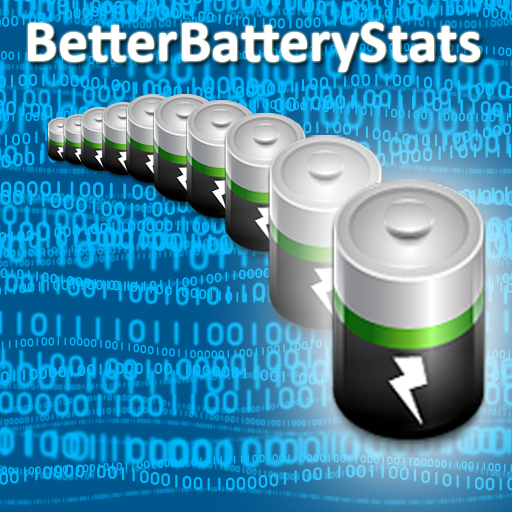
<style>
.page{position:relative;width:512px;height:512px}
.page>*{position:absolute;margin:0}
.t1{font:60px "Calibri-Bold";color:#ffffff}
</style>
<div class="page">
<p class="t1" style="left:28px;top:22px;width:453px;height:50px">BetterBatteryStats</p>
</div>
